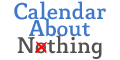
<style>
.page{position:relative;width:120px;height:60px;background:#ffffff}
.page>*{position:absolute;margin:0}
.t1{font:22.7px/17.1px "Mido-Medium";color:#4079c9}
.t2{font:22.7px/17.1px "Mido-Medium";color:#525252}
</style>
<div class="page">
<p class="t1" style="left:14px;top:1px;width:92px;height:58px;text-align:center">Calendar<br>About<br><span class="t2">Nothing</span></p>
</div>
